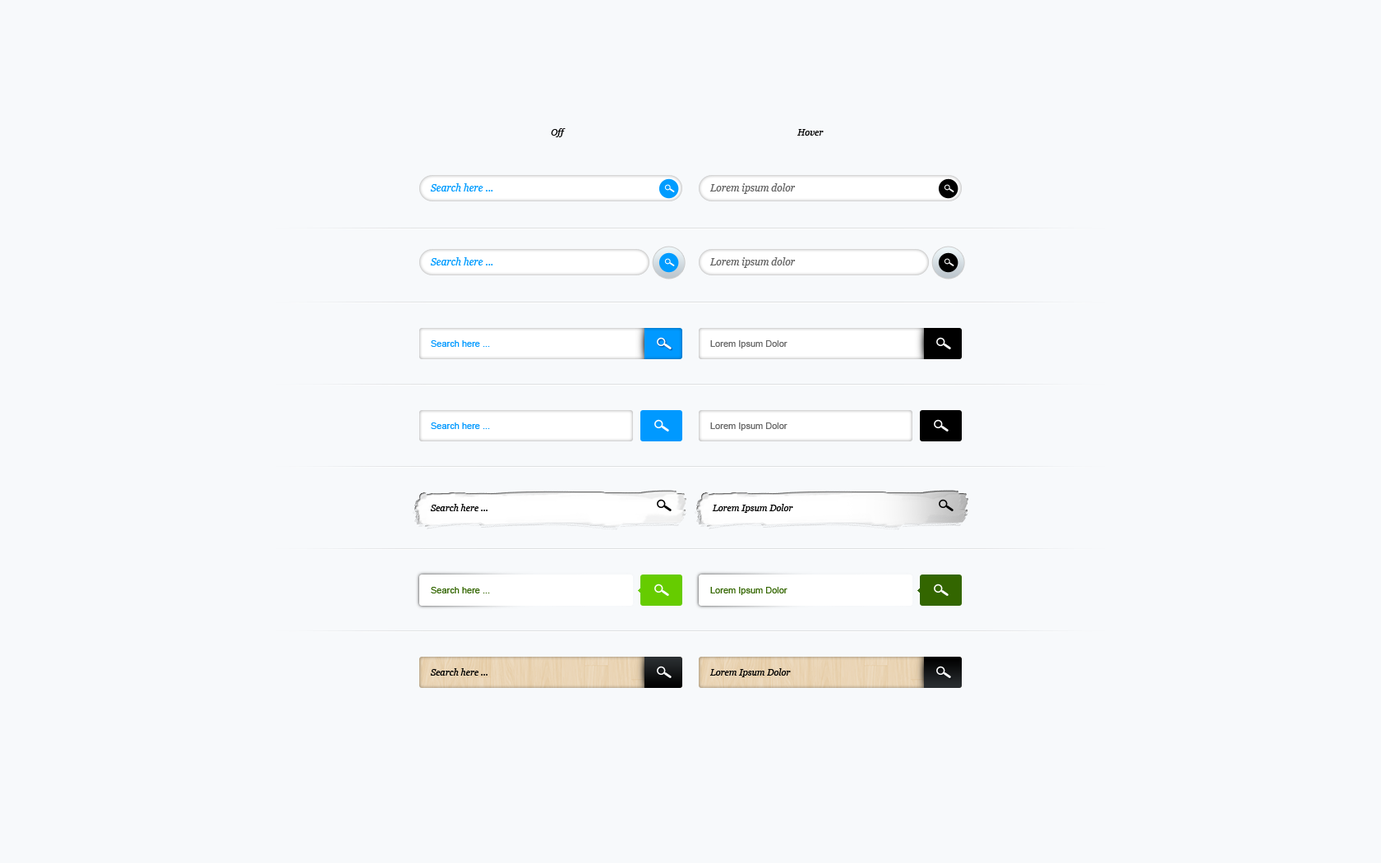
<style>
.page{position:relative;width:1381px;height:863px;background:#f7f9fb}
.page>*{position:absolute;margin:0}
.t1{font:9px "Georgia-Italic";color:#000000}
.t2{font:9.9px "Georgia-Italic";color:#009cff}
.t3{font:9.9px "Georgia-Italic";color:#666666}
.t4{font:9px "ArialMT";color:#009cff}
.t5{font:9px "ArialMT";color:#666666}
.t6{font:9px "ArialMT";color:#336600}
</style>
<div class="page">
<p class="t1" style="left:551px;top:128px;width:15px;height:9px">Off</p>
<p class="t1" style="left:798px;top:129px;width:26px;height:7px">Hover</p>
<p class="t2" style="left:430px;top:183px;width:63px;height:9px">Search here ...</p>
<p class="t3" style="left:710px;top:183px;width:86px;height:11px">Lorem ipsum dolor</p>
<p class="t2" style="left:430px;top:257px;width:63px;height:9px">Search here ...</p>
<p class="t3" style="left:710px;top:257px;width:86px;height:11px">Lorem ipsum dolor</p>
<p class="t4" style="left:431px;top:340px;width:59px;height:7px">Search here ...</p>
<p class="t5" style="left:710px;top:340px;width:78px;height:9px">Lorem Ipsum Dolor</p>
<p class="t4" style="left:431px;top:423px;width:59px;height:6px">Search here ...</p>
<p class="t5" style="left:710px;top:423px;width:78px;height:8px">Lorem Ipsum Dolor</p>
<p class="t1" style="left:430px;top:504px;width:58px;height:7px">Search here ...</p>
<p class="t1" style="left:712px;top:504px;width:81px;height:9px">Lorem Ipsum Dolor</p>
<p class="t6" style="left:431px;top:587px;width:59px;height:7px">Search here ...</p>
<p class="t6" style="left:710px;top:587px;width:78px;height:8px">Lorem Ipsum Dolor</p>
<p class="t1" style="left:430px;top:668px;width:58px;height:8px">Search here ...</p>
<p class="t1" style="left:710px;top:668px;width:81px;height:9px">Lorem Ipsum Dolor</p>
</div>
